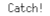
<style>
.page{position:relative;width:50px;height:16px;background:#ffffff}
.page>*{position:absolute;margin:0}
.t1{font:18px "Silver"}
</style>
<div class="page">
<p class="t1" style="left:8px;top:3px;width:34px;height:10px">Catch!</p>
</div>
